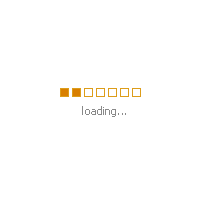
<style>
.page{position:relative;width:200px;height:200px;background:#ffffff}
.page>*{position:absolute;margin:0}
.t1{font:11px "Tahoma";color:#898989}
</style>
<div class="page">
<p class="t1" style="left:82px;top:106px;width:44px;height:11px">loading...</p>
</div>
